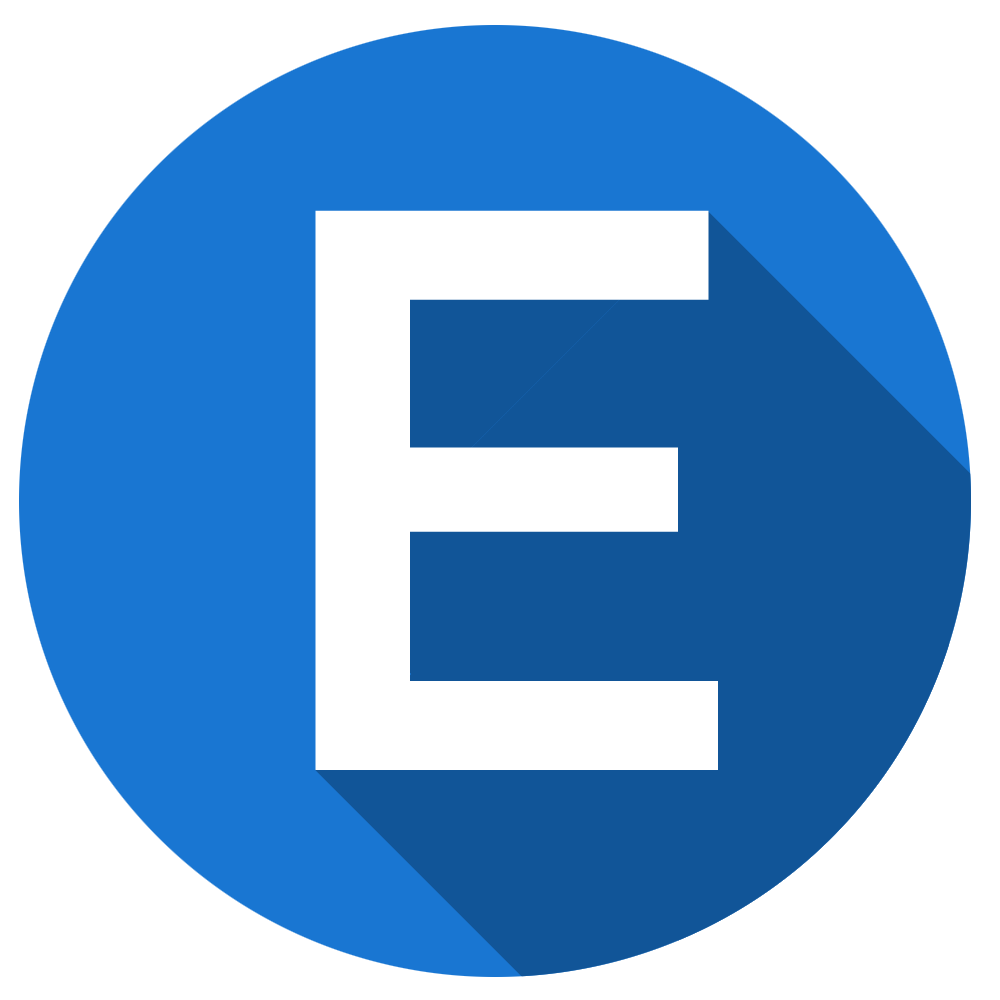
<style>
.page{position:relative;width:1000px;height:1000px;background:#ffffff}
.page>*{position:absolute;margin:0}
.t1{font:800.1px "Montserrat-Regular";color:#ffffff}
</style>
<div class="page">
<p class="t1" style="left:315px;top:210px;width:403px;height:560px">E</p>
</div>
